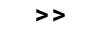
<style>
.page{position:relative;width:100px;height:30px;background:#ffffff}
.page>*{position:absolute;margin:0}
.t1{font:24px "SegoeUIBlack-Italic";color:#000000}
</style>
<div class="page">
<p class="t1" style="left:36px;top:9px;width:29px;height:13px">&gt;&gt;</p>
</div>
